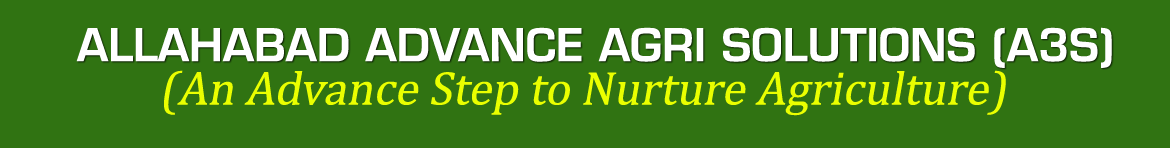
<style>
.page{position:relative;width:1170px;height:148px;background:#307312}
.page>*{position:absolute;margin:0}
.t1{font:44px "Square721Demi-Normal";color:#ffffff;text-transform:uppercase}
.t2{font:48px "Cambria";color:#eaff00;font-style:italic}
</style>
<div class="page">
<p class="t1" style="left:76px;top:27px;width:1036px;height:41px">Allahabad Advance Agri Solutions (A3S)</p>
<p class="t2" style="left:164px;top:70px;width:842px;height:46px">(An Advance Step to Nurture Agriculture)</p>
</div>
